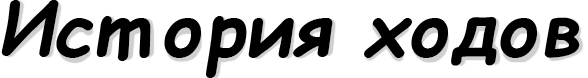
<style>
.page{position:relative;width:588px;height:78px;background:#ffffff}
.page>*{position:absolute;margin:0}
.t1{font:75px "ComicSansMS-BoldItalic";color:#000000}
</style>
<div class="page">
<p class="t1" style="left:1px;top:0px;width:579px;height:78px">Ист ория ходов</p>
</div>
